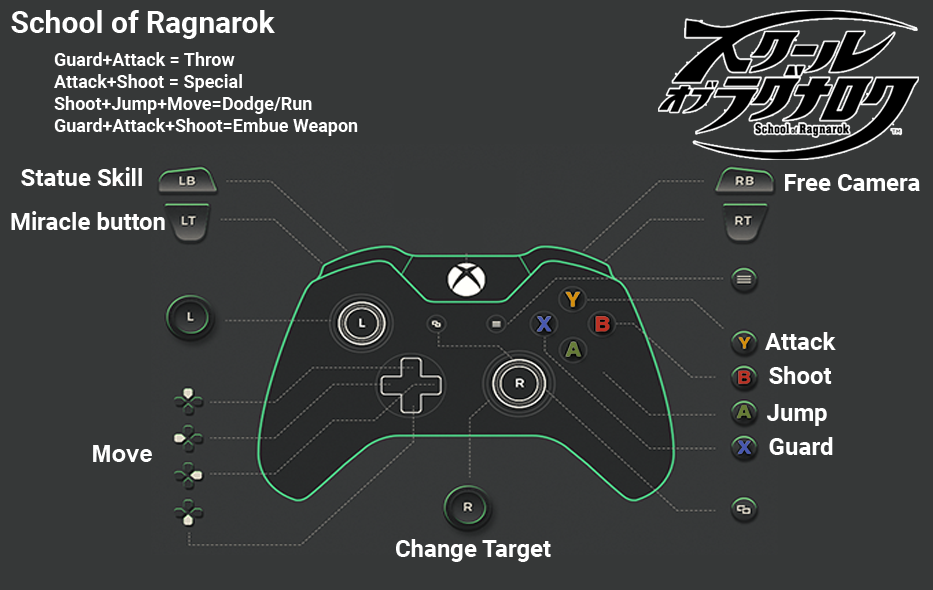
<style>
.page{position:relative;width:933px;height:590px;background:#363838}
.page>*{position:absolute;margin:0}
.t1{font:30px "Roboto-Bold";color:#ffffff}
.t2{font:18px/22px "Roboto-Bold";color:#ffffff}
.t3{font:24px "Roboto-Bold";color:#ffffff}
.t4{font:24px "Arial-BoldMT";color:#fefefe}
</style>
<div class="page">
<p class="t1" style="left:11px;top:10px;width:264px;height:29px">School of Ragnarok</p>
<p class="t2" style="left:54px;top:52px;width:304px;height:84px">Guard+Attack = Throw<br>Attack+Shoot = Special<br>Shoot+Jump+Move=Dodge/Run<br>Guard+Attack+Shoot=Embue Weapon</p>
<p class="t3" style="left:21px;top:167px;width:121px;height:19px">Statue Skill</p>
<p class="t3" style="left:785px;top:174px;width:135px;height:17px">Free Camera</p>
<p class="t3" style="left:11px;top:211px;width:154px;height:19px">Miracle button</p>
<p class="t3" style="left:765px;top:332px;width:71px;height:18px">Attack</p>
<p class="t3" style="left:769px;top:366px;width:63px;height:18px">Shoot</p>
<p class="t3" style="left:767px;top:404px;width:60px;height:22px">Jump</p>
<p class="t3" style="left:769px;top:437px;width:64px;height:18px">Guard</p>
<p class="t4" style="left:93px;top:445px;width:59px;height:17px">Move</p>
<p class="t3" style="left:396px;top:539px;width:155px;height:23px">Change Target</p>
</div>
